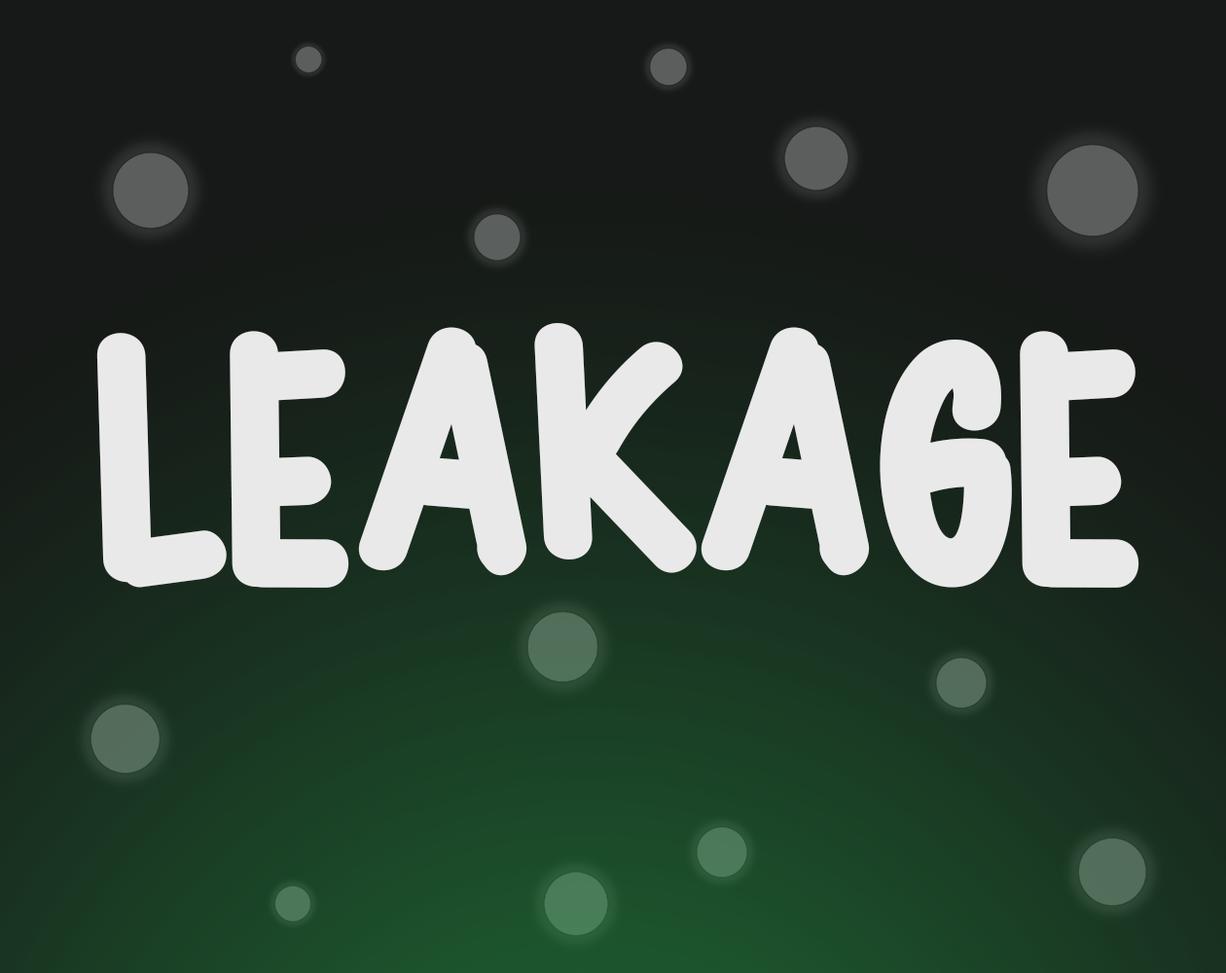
<style>
.page{position:relative;width:1226px;height:973px;background:#161917}
.page>*{position:absolute;margin:0}
.t1{font:392.2px "AcidsRegular";color:#e9e9e9}
</style>
<div class="page">
<p class="t1" style="left:96px;top:323px;width:1043px;height:265px">LEAKAGE</p>
</div>
